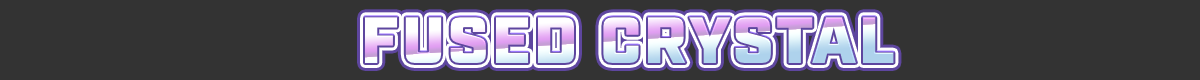
<style>
.page{position:relative;width:1200px;height:80px;background:#333333}
.page>*{position:absolute;margin:0}
.t1{font:65.2px "Industry-Ultra";letter-spacing:0.05em;text-transform:uppercase}
</style>
<div class="page">
<p class="t1" style="left:365px;top:17px;width:529px;height:46px">Fused Crystal</p>
</div>
